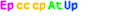
<style>
.page{position:relative;width:128px;height:16px;background:#ffffff}
.page>*{position:absolute;margin:0}
.t1{font:12px "SourceCodePro-Regular";color:#ea00ff}
.t2{font:12px "SourceCodePro-Regular";color:#ffc000}
.t3{font:12px "SourceCodePro-Regular";color:#00ff00}
.t4{font:12px "SourceCodePro-Regular";color:#0042ff}
</style>
<div class="page">
<p class="t1" style="left:1px;top:1px;width:12px;height:10px">Ep</p>
<p class="t2" style="left:17px;top:3px;width:12px;height:6px">cc</p>
<p class="t2" style="left:33px;top:3px;width:12px;height:8px">cp</p>
<p class="t3" style="left:48px;top:1px;width:14px;height:8px">At</p>
<p class="t4" style="left:65px;top:1px;width:12px;height:10px">Up</p>
</div>
